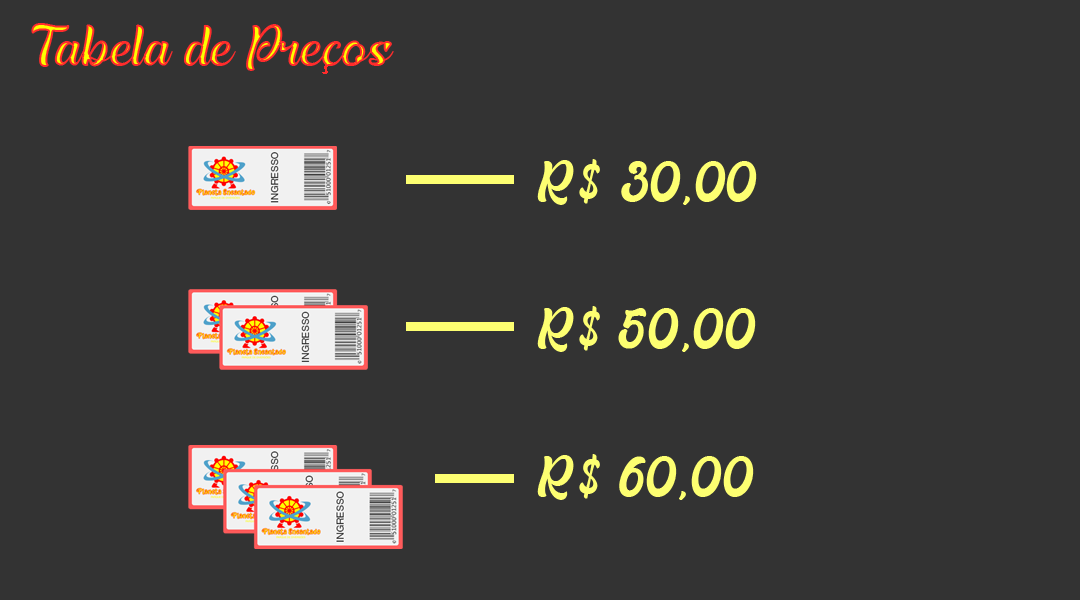
<style>
.page{position:relative;width:1080px;height:600px;background:#333333}
.page>*{position:absolute;margin:0}
.t1{font:50px "Realistica";color:#fdff71}
</style>
<div class="page">
<p class="t1" style="left:537px;top:159px;width:220px;height:46px">R$ 30,00</p>
<p class="t1" style="left:537px;top:306px;width:219px;height:46px">R$ 50,00</p>
<p class="t1" style="left:537px;top:454px;width:217px;height:46px">R$ 60,00</p>
</div>
